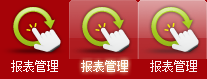
<style>
.page{position:relative;width:207px;height:79px;background:#a60308}
.page>*{position:absolute;margin:0}
.t1{font:12px "NSimSun";color:#fdfafa}
</style>
<div class="page">
<p class="t1" style="left:11px;top:60px;width:47px;height:12px">报表管理</p>
<p class="t1" style="left:81px;top:60px;width:47px;height:12px">报表管理</p>
<p class="t1" style="left:150px;top:60px;width:47px;height:12px">报表管理</p>
</div>
